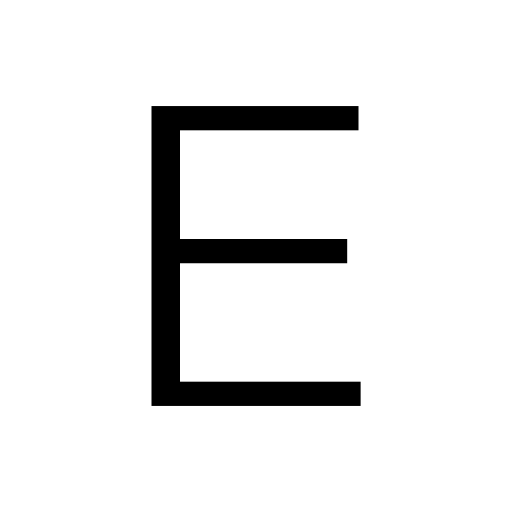
<style>
.page{position:relative;width:512px;height:512px;background:#ffffff}
.page>*{position:absolute;margin:0}
.t1{font:420px "HelveticaNeue-Light";color:#000000}
</style>
<div class="page">
<p class="t1" style="left:151px;top:106px;width:210px;height:300px">E</p>
</div>
